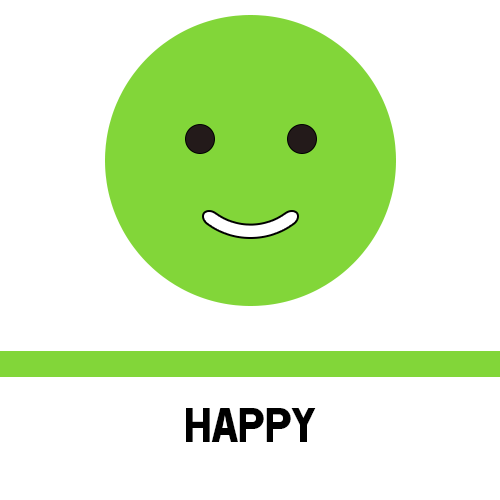
<style>
.page{position:relative;width:500px;height:500px;background:#ffffff}
.page>*{position:absolute;margin:0}
.t1{font:48px "HotelDeParisXe";color:#000000}
</style>
<div class="page">
<p class="t1" style="left:186px;top:408px;width:130px;height:34px">happy</p>
</div>
